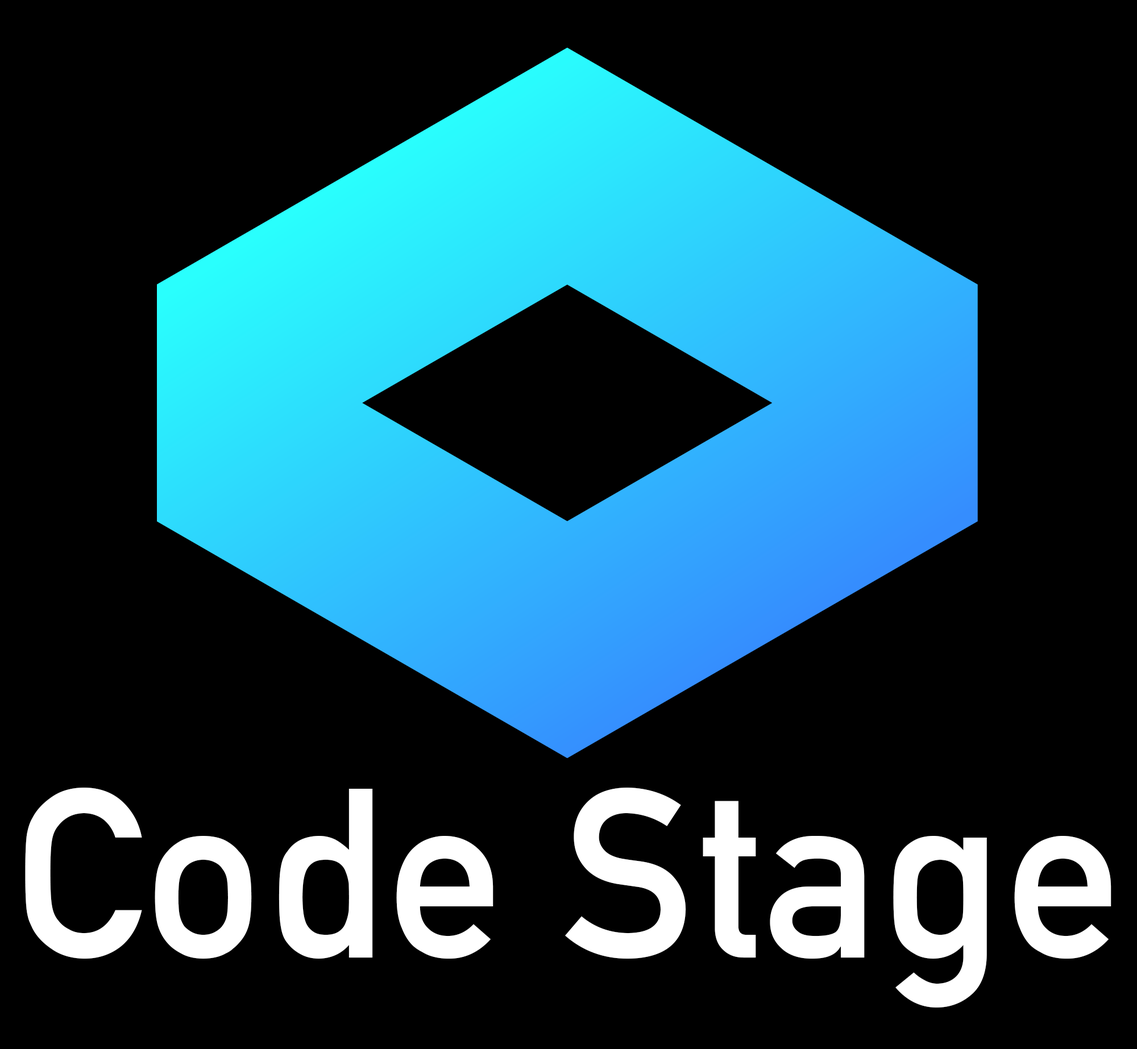
<style>
.page{position:relative;width:1137px;height:1049px;background:#000000}
.page>*{position:absolute;margin:0}
.t1{font:236.8px "DINAlternate-Bold";color:#ffffff}
</style>
<div class="page">
<p class="t1" style="left:25px;top:788px;width:1086px;height:220px">Code Stage</p>
</div>
